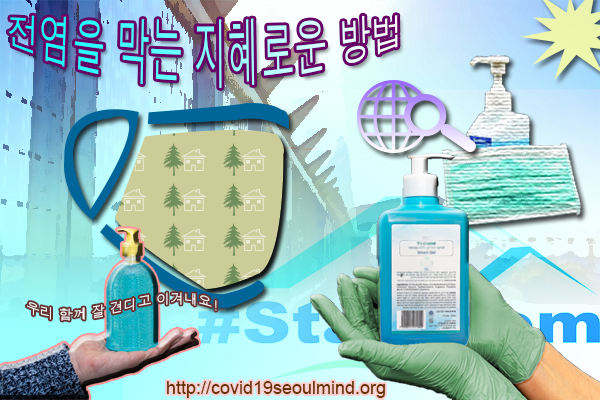
<style>
.page{position:relative;width:600px;height:400px}
.page>*{position:absolute;margin:0}
.t1{font:32.8px "Dotum"}
.t2{font:14.1px "Dotum";color:#fefefe}
.t3{font:17.8px "ArialMT";color:#663300}
</style>
<div class="page">
<p class="t1" style="left:8px;top:15px;width:390px;height:73px">전염을 막는 지혜로운 방법</p>
<p class="t2" style="left:26px;top:292px;width:191px;height:29px">우리 함께 잘 견디고 이겨내요!</p>
<p class="t3" style="left:167px;top:381px;width:218px;height:17px">http://covid19seoulmind.org</p>
</div>
